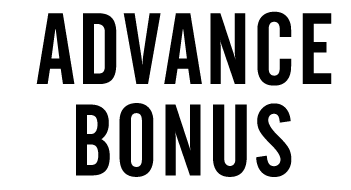
<style>
.page{position:relative;width:351px;height:190px;background:#ffffff}
.page>*{position:absolute;margin:0}
.t1{font:100px "AlternateGothicNo2BT-Regular";letter-spacing:0.025em;color:#000000}
</style>
<div class="page">
<p class="t1" style="left:36px;top:11px;width:296px;height:75px">ADVANCE</p>
<p class="t1" style="left:76px;top:103px;width:216px;height:74px">BONUS</p>
</div>
